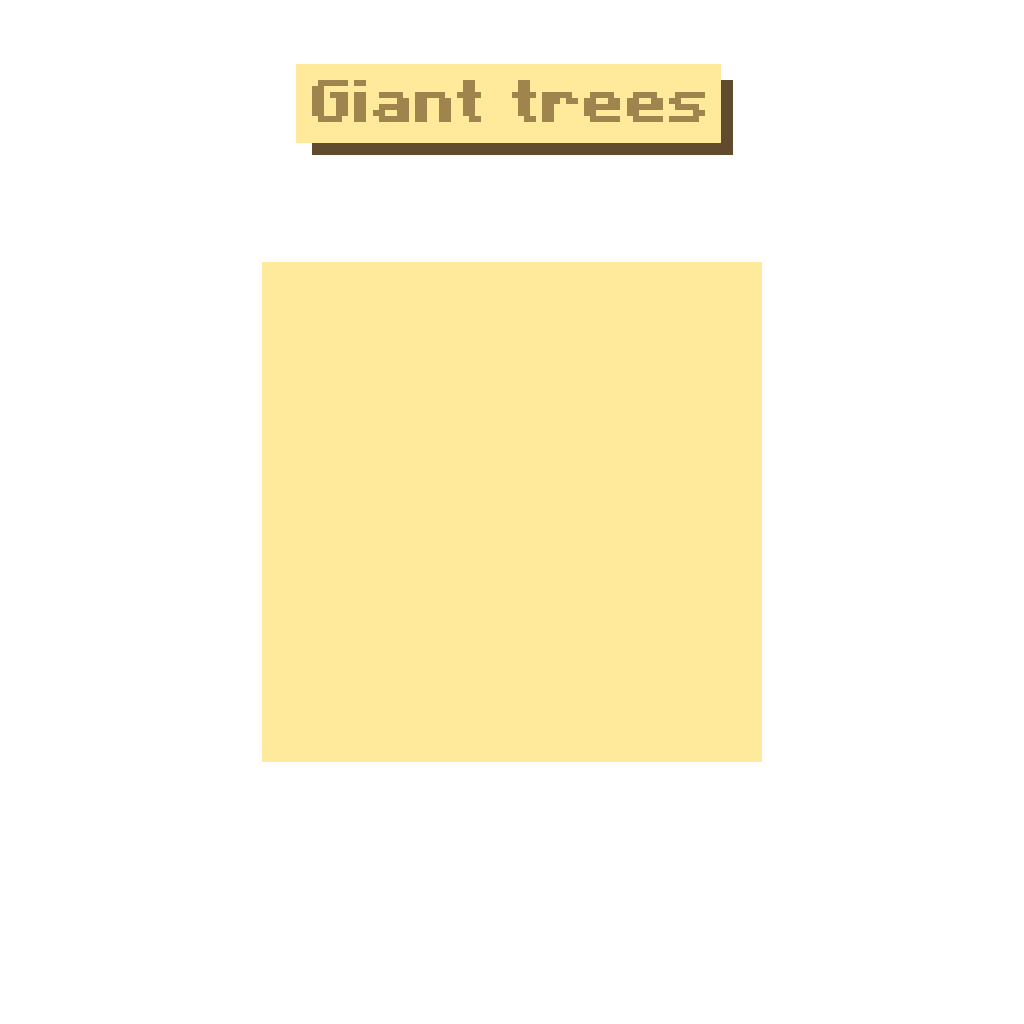
<style>
.page{position:relative;width:1024px;height:1024px;background:#ffffff}
.page>*{position:absolute;margin:0}
.t1{font:60px "Minecraft-Bold";letter-spacing:0.005em;color:#9f844d}
</style>
<div class="page">
<p class="t1" style="left:312px;top:80px;width:393px;height:42px">Giant trees</p>
</div>
